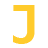
<style>
.page{position:relative;width:48px;height:48px;background:#ffffff}
.page>*{position:absolute;margin:0}
.t1{font:60px "Consolas-Bold";color:#ffcb2c}
</style>
<div class="page">
<p class="t1" style="left:13px;top:5px;width:22px;height:39px">J</p>
</div>
